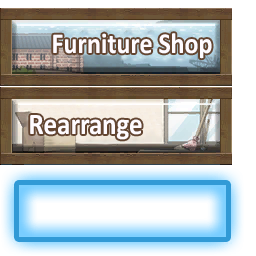
<style>
.page{position:relative;width:256px;height:256px}
.page>*{position:absolute;margin:0}
.t1{font:29px "Calibri-Bold";color:#fffbff;scale:0.9 1}
.t2{font:30px "Calibri-Bold";color:#fffbff;scale:0.9 1}
</style>
<div class="page">
<p class="t1" style="left:53px;top:33px;width:159px;height:26px">Furniture Shop</p>
<p class="t2" style="left:30px;top:115px;width:112px;height:25px">Rearrange</p>
</div>
